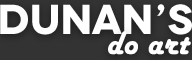
<style>
.page{position:relative;width:192px;height:60px;background:#ffffff}
.page>*{position:absolute;margin:0}
.t1{font:41.7px "Novecentowide-Bold";color:#ffffff}
.t2{font:33.3px "HarlowSolid";color:#ffffff;font-weight:bold}
</style>
<div class="page">
<p class="t1" style="left:0px;top:4px;width:192px;height:31px">DUNAN’s</p>
<p class="t2" style="left:108px;top:31px;width:83px;height:24px">do art</p>
</div>
